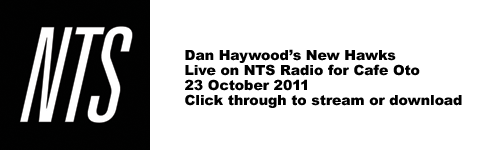
<style>
.page{position:relative;width:500px;height:150px;background:#ffffff}
.page>*{position:absolute;margin:0}
.t1{font:14px/7.5px "Arial-Black";color:#000000}
</style>
<div class="page">
<p class="t1" style="left:185px;top:49px;width:277px;height:59px">Dan Haywood’s New Hawks<br><br>Live on NTS Radio for Cafe Oto<br><br>23 October 2011<br><br>Click through to stream or download</p>
</div>
